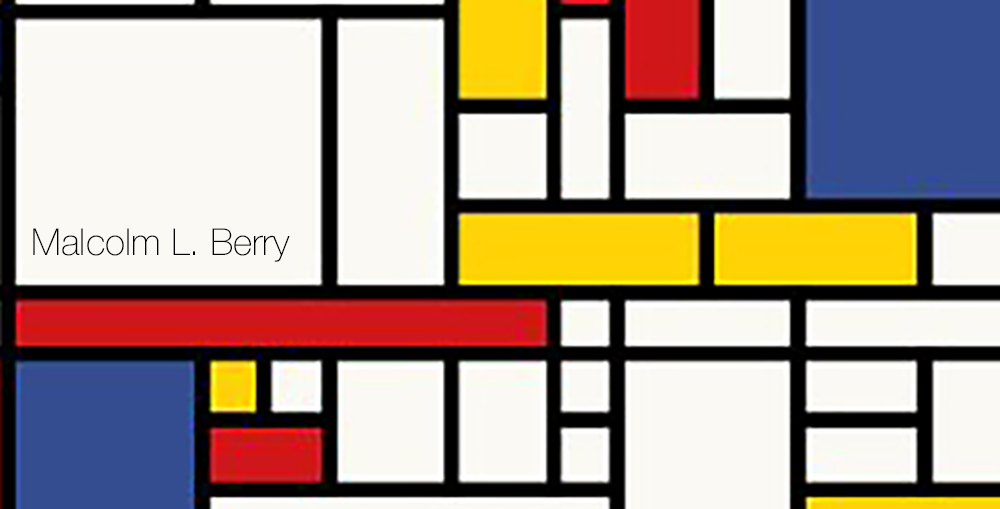
<style>
.page{position:relative;width:1000px;height:509px;background:#faf9f4}
.page>*{position:absolute;margin:0}
.t1{font:36.9px "HelveticaNeue-Thin";color:#030303}
</style>
<div class="page">
<p class="t1" style="left:33px;top:228px;width:257px;height:34px">Malcolm L. Berry</p>
</div>
